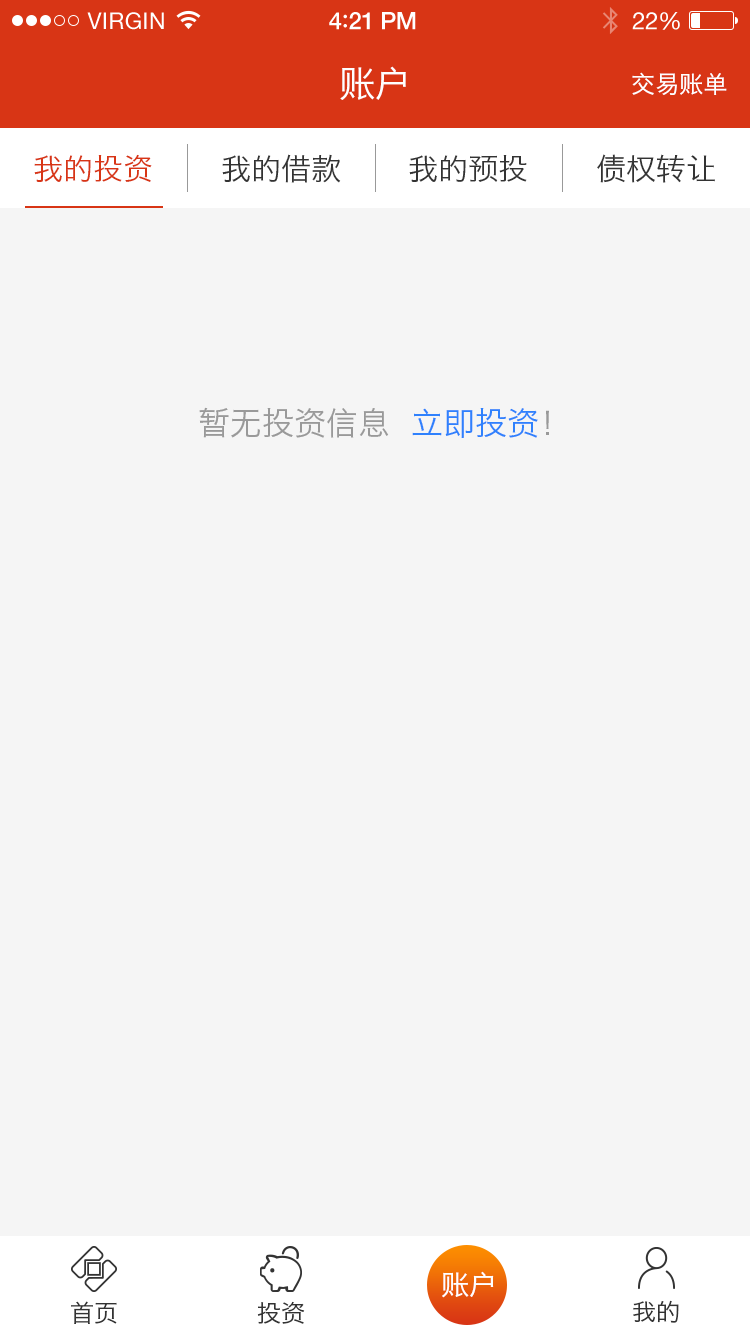
<style>
.page{position:relative;width:750px;height:1334px;background:#f5f5f5}
.page>*{position:absolute;margin:0}
.t1{font:23px "HelveticaNeue";letter-spacing:0.02em;color:#ffffff}
.t2{font:24px "HelveticaNeue-Medium";letter-spacing:-0.02em;color:#ffffff}
.t3{font:26px "Avenir-Medium";letter-spacing:-0.02em;color:#ffffff}
.t4{font:24px "HelveticaNeue";letter-spacing:-0.02em;color:#ffffff}
.t5{font:36px "HiraginoSansGB-W3";color:#ffffff}
.t6{font:24px "HiraginoSansGB-W3";color:#ffffff}
.t7{font:30px "HiraginoSansGB-W3";color:#d83515}
.t8{font:30px "HiraginoSansGB-W3";color:#333333}
.t9{font:32px "HiraginoSansGB-W3";color:#999999}
.t10{font:32px "HiraginoSansGB-W3";color:#2f81fd}
.t11{font:28px "HiraginoSansGB-W3";color:#ffffff}
.t12{font:24px "HiraginoSansGB-W3";color:#333333}
</style>
<div class="page">
<p class="t1" style="left:87px;top:12px;width:77px;height:18px">VIRGIN</p>
<p class="t2" style="left:329px;top:12px;width:87px;height:18px">4<span class="t3">:</span>21 PM</p>
<p class="t4" style="left:632px;top:12px;width:48px;height:18px">22%</p>
<p class="t5" style="left:340px;top:66px;width:66px;height:34px">账户</p>
<p class="t6" style="left:632px;top:72px;width:95px;height:23px">交易账单</p>
<p class="t7" style="left:34px;top:154px;width:118px;height:28px">我的投资</p>
<p class="t8" style="left:222px;top:154px;width:119px;height:29px">我的借款</p>
<p class="t8" style="left:409px;top:155px;width:118px;height:27px">我的预投</p>
<p class="t8" style="left:597px;top:154px;width:118px;height:29px">债权转让</p>
<p class="t9" style="left:199px;top:407px;width:350px;height:31px">暂无投资信息  <span class="t10">立即投资</span>！</p>
<p class="t11" style="left:442px;top:1271px;width:52px;height:27px">账户</p>
<p class="t12" style="left:71px;top:1301px;width:46px;height:23px">首页</p>
<p class="t12" style="left:257px;top:1301px;width:48px;height:23px">投资</p>
<p class="t12" style="left:633px;top:1300px;width:46px;height:23px">我的</p>
</div>
